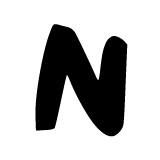
<style>
.page{position:relative;width:160px;height:160px;background:#ffffff}
.page>*{position:absolute;margin:0}
.t1{font:159.4px "QAReports";color:#000000}
</style>
<div class="page">
<p class="t1" style="left:35px;top:24px;width:93px;height:113px">N</p>
</div>
